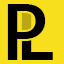
<style>
.page{position:relative;width:64px;height:64px;background:#f7df1e}
.page>*{position:absolute;margin:0}
.t1{font:80px "SegoeUI-SemiBold";color:#000000}
</style>
<div class="page">
<p class="t1" style="left:7px;top:4px;width:39px;height:56px">P</p>
<p class="t1" style="left:21px;top:4px;width:32px;height:56px">L</p>
</div>
